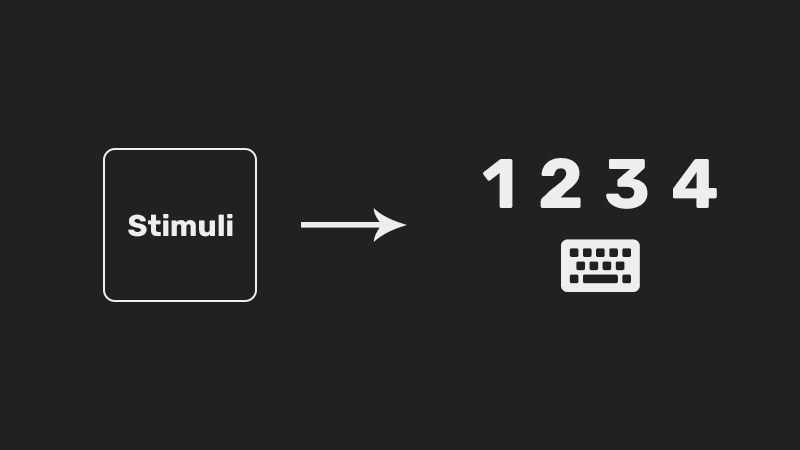
<style>
.page{position:relative;width:800px;height:450px;background:#212121}
.page>*{position:absolute;margin:0}
.t1{font:70px "Rubik-Bold";color:#eeeeee}
.t2{font:70px "FontAwesome5Free-Solid";color:#eeeeee}
.t3{font:30px "Rubik-Bold";color:#eeeeee}
</style>
<div class="page">
<p class="t1" style="left:483px;top:158px;width:234px;height:134px;text-align:center">1  2  3  4<br><span class="t2">keyboard</span></p>
<p class="t3" style="left:128px;top:214px;width:105px;height:23px">Stimuli</p>
</div>
